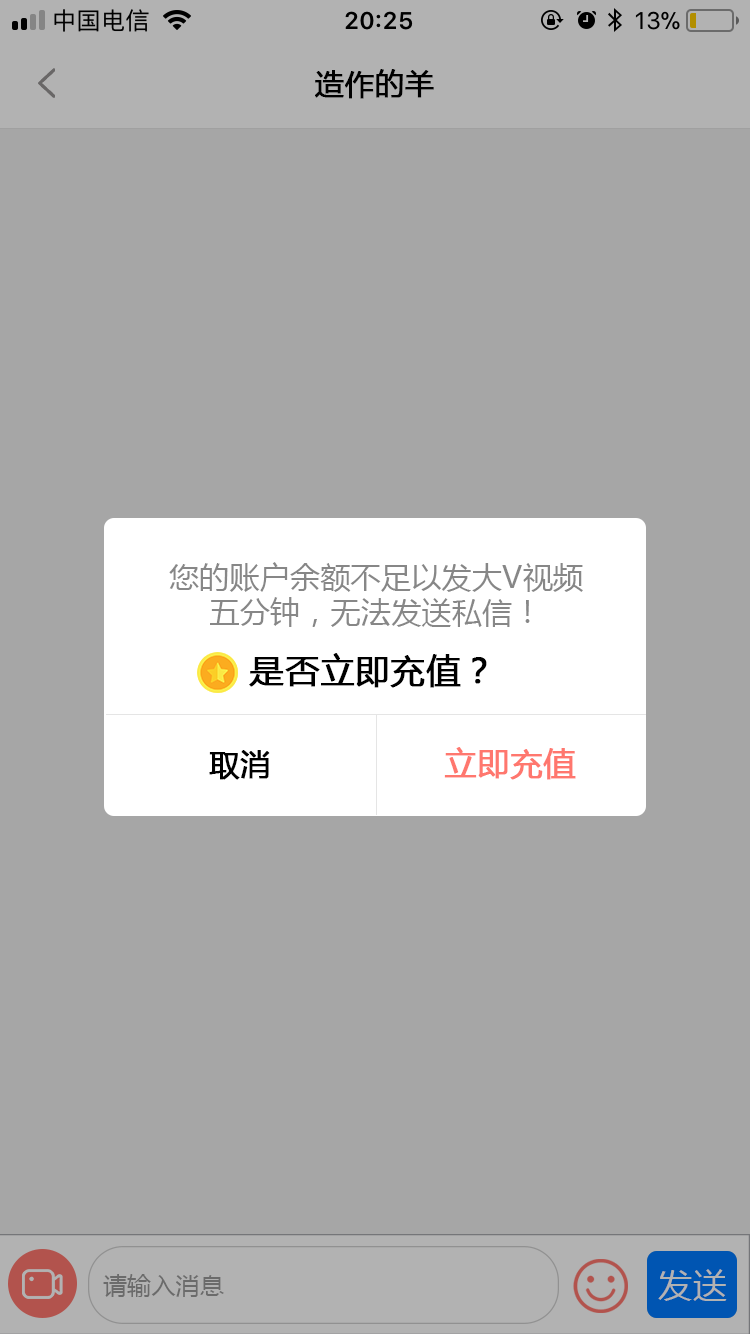
<style>
.page{position:relative;width:750px;height:1334px;background:#a6a6a6}
.page>*{position:absolute;margin:0}
.t1{font:29px "MicrosoftYaHei";letter-spacing:0.01em;color:#000000;font-weight:bold}
.t2{font:30px/35px "MicrosoftYaHei";letter-spacing:0.01em;color:#878787}
.t3{font:34px "MicrosoftYaHei";letter-spacing:0.01em;color:#000000;font-weight:bold}
.t4{font:30px "MicrosoftYaHei";letter-spacing:0.01em;color:#000000;font-weight:bold}
.t5{font:32px "MicrosoftYaHei";letter-spacing:0.01em;color:#ff776e;font-weight:bold}
.t6{font:24px "MicrosoftYaHei";letter-spacing:0.01em;color:#6b6b6b}
.t7{font:34px "MicrosoftYaHei";letter-spacing:0.04em;color:#b2b2b2}
</style>
<div class="page">
<p class="t1" style="left:315px;top:69px;width:119px;height:30px">造作的羊</p>
<p class="t2" style="left:169px;top:562px;width:414px;height:65px;text-align:center">您的账户余额不足以发大V视频<br>五分钟，无法发送私信！</p>
<p class="t3" style="left:249px;top:653px;width:238px;height:35px">是否立即充值？</p>
<p class="t4" style="left:209px;top:750px;width:61px;height:30px">取消</p>
<p class="t5" style="left:444px;top:747px;width:132px;height:33px">立即充值</p>
<p class="t6" style="left:103px;top:1274px;width:121px;height:23px">请输入消息</p>
<p class="t7" style="left:658px;top:1269px;width:69px;height:32px">发送</p>
<p class="t7" style="left:658px;top:1269px;width:69px;height:32px">发送</p>
</div>
